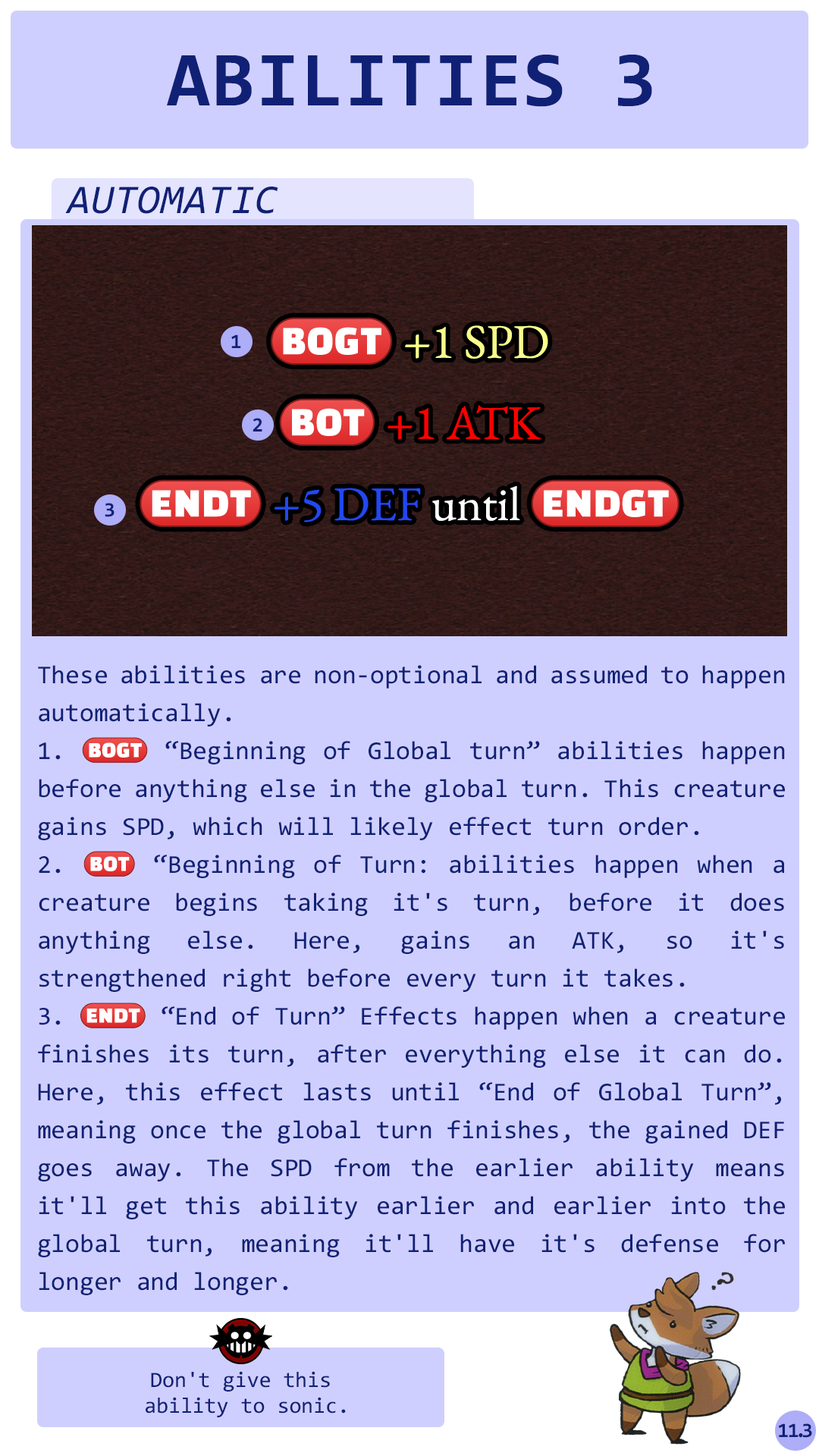
<style>
.page{position:relative;width:819px;height:1456px;background:#cfcfff}
.page>*{position:absolute;margin:0}
.t1{font:78.3px "Consolas-Bold";letter-spacing:0.02em;color:#102175}
.t2{font:41.1px "Consolas-Italic";letter-spacing:0.02em;color:#102175}
.t3{font:82.7px/81.1px "stoogedings-Regular"}
.t4{font:82.7px/81.1px "EBGaramond-Regular"}
.t5{font:20.5px "Consolas-Bold";color:#102175}
.t6{font:25.8px/37.9px "Consolas";color:#102175}
.t7{font:25.8px/37.9px "stoogedings-Regular";color:#102175}
.t8{font:22px/25.8px "Consolas";color:#102175}
.t9{font:20.5px "Consolas-Bold";letter-spacing:-0.06em;color:#102175}
.t10{font:20.5px "Consolas-Bold";letter-spacing:-0.2em;color:#102175}
.t11{font:20.5px "Consolas-Bold";letter-spacing:-0.22em;color:#102175}
</style>
<div class="page">
<p class="t1" style="left:167px;top:55px;width:485px;height:52px">ABILITIES 3</p>
<p class="t2" style="left:65px;top:187px;width:213px;height:27px">AUTOMATIC</p>
<p class="t3" style="left:140px;top:317px;width:539px;height:210px;text-align:center">(BOGT) <span class="t4">+1 SPD<br></span>(BOT) <span class="t4">+1 ATK<br></span>(ENDT) <span class="t4">+5 DEF</span><span class="t4"> until </span>(ENDGT)</p>
<p class="t5" style="left:231px;top:334px;width:10px;height:14px">1</p>
<p class="t5" style="left:253px;top:418px;width:9px;height:13px">2</p>
<p class="t5" style="left:105px;top:503px;width:10px;height:14px">3</p>
<p class="t6" style="left:38px;top:665px;width:747px;height:630px;text-align:justify">These abilities are non-optional and assumed to happen automatically.<br>1. <span class="t7">(BOGT)</span> “Beginning of Global turn” abilities happen before anything else in the global turn. This creature gains SPD, which will likely effect turn order.<br>2. <span class="t7">(BOT)</span> “Beginning of Turn: abilities happen when a creature begins taking it's turn, before it does anything else. Here, gains an ATK, so it's strengthened right before every turn it takes.<br>3. <span class="t7">(ENDT)</span> “End of Turn” Effects happen when a creature finishes its turn, after everything else it can do. Here, this effect lasts until “End of Global Turn”, meaning once the global turn finishes, the gained DEF goes away. The SPD from the earlier ability means it'll get this ability earlier and earlier into the global turn, meaning it'll have it's defense for longer and longer.</p>
<p class="t8" style="left:146px;top:1371px;width:200px;height:46px;text-align:center">Don't give this<br> ability to sonic.</p>
<p class="t9" style="left:778px;top:1423px;width:34px;height:15px">1<span class="t10">1</span><span class="t11">.</span>3</p>
</div>
